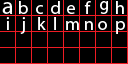
<style>
.page{position:relative;width:128px;height:64px;background:#000000}
.page>*{position:absolute;margin:0}
.t1{font:24px "MyriadPro-Regular";color:#ffffff}
.t2{font:18px "MyriadPro-Regular";color:#ffffff}
</style>
<div class="page">
<p class="t1" style="left:2px;top:2px;width:11px;height:12px">a</p>
<p class="t2" style="left:19px;top:1px;width:9px;height:13px">b</p>
<p class="t2" style="left:36px;top:5px;width:7px;height:9px">c</p>
<p class="t2" style="left:51px;top:1px;width:9px;height:13px">d</p>
<p class="t2" style="left:67px;top:5px;width:8px;height:9px">e</p>
<p class="t2" style="left:84px;top:1px;width:7px;height:13px">f</p>
<p class="t2" style="left:100px;top:1px;width:8px;height:13px">g</p>
<p class="t2" style="left:116px;top:1px;width:8px;height:13px">h</p>
<p class="t2" style="left:6px;top:17px;width:119px;height:17px">i   j   k  l  m n o  p</p>
</div>
